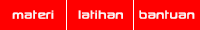
<style>
.page{position:relative;width:200px;height:30px;background:#ff0000}
.page>*{position:absolute;margin:0}
.t1{font:16.7px "SonySketchEF";color:#f9f5f5}
</style>
<div class="page">
<p class="t1" style="left:12px;top:10px;width:42px;height:9px">materi</p>
<p class="t1" style="left:78px;top:10px;width:45px;height:9px">latihan</p>
<p class="t1" style="left:139px;top:10px;width:56px;height:9px">bantuan</p>
</div>
